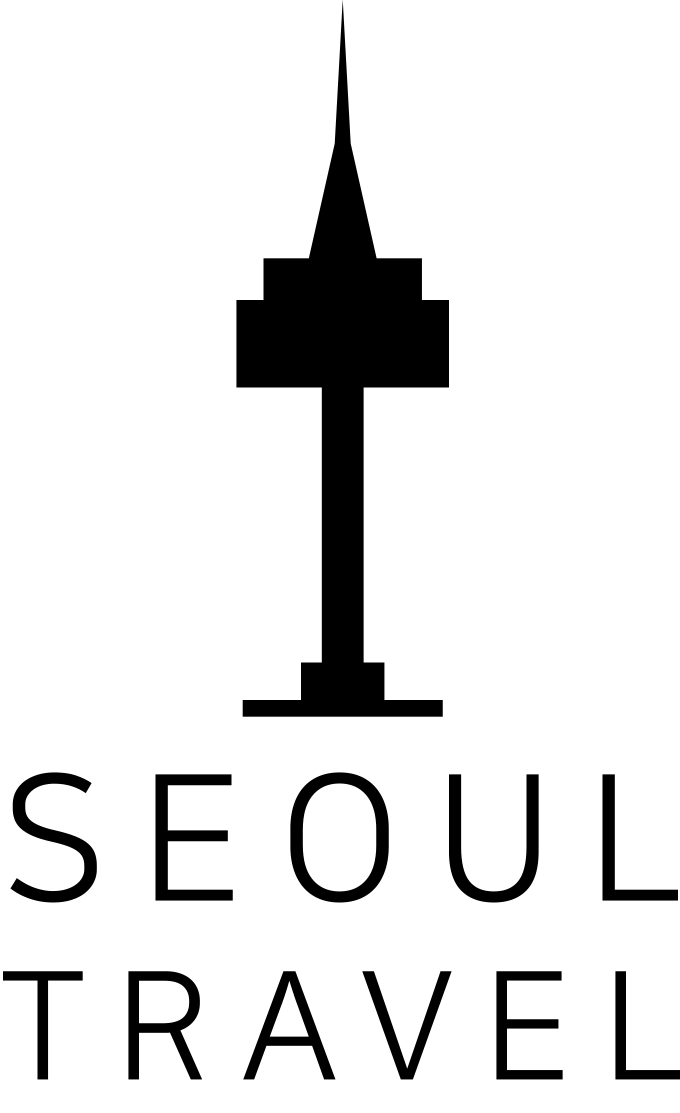
<style>
.page{position:relative;width:680px;height:1113px;background:#ffffff}
.page>*{position:absolute;margin:0}
.t1{font:150px "NanumSquareR";letter-spacing:0.2em;color:#000000;text-transform:uppercase}
.t2{font:175px "NanumSquareR";letter-spacing:0.2em;color:#000000;text-transform:uppercase}
</style>
<div class="page">
<p class="t1" style="left:3px;top:772px;width:678px;height:308px"><span class="t2">Seoul <br></span>Travel</p>
</div>
